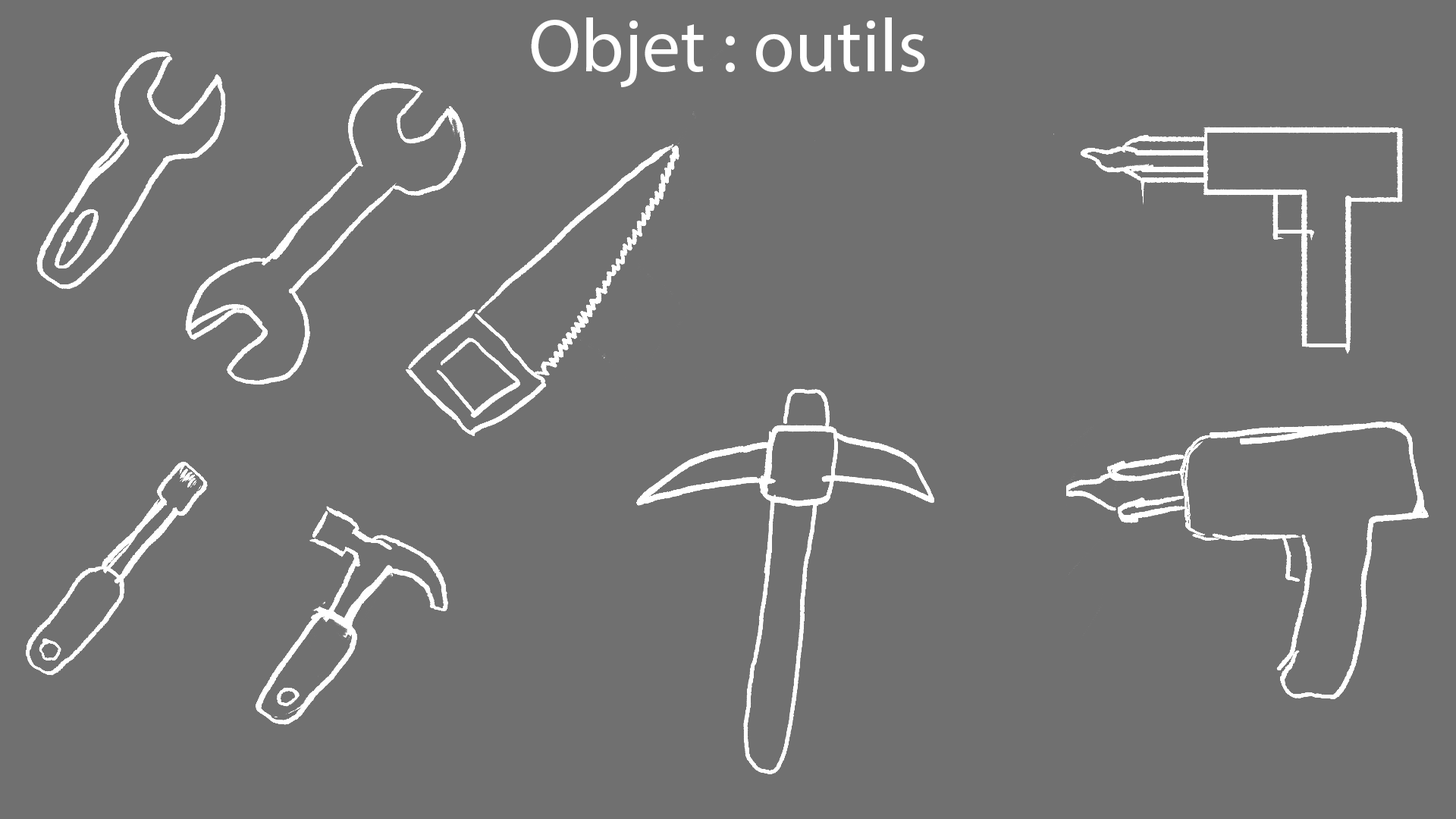
<style>
.page{position:relative;width:1456px;height:819px;background:#707070}
.page>*{position:absolute;margin:0}
.t1{font:75.8px "MyriadPro-Regular";color:#ffffff}
</style>
<div class="page">
<p class="t1" style="left:531px;top:17px;width:394px;height:70px">Objet : outils</p>
</div>
